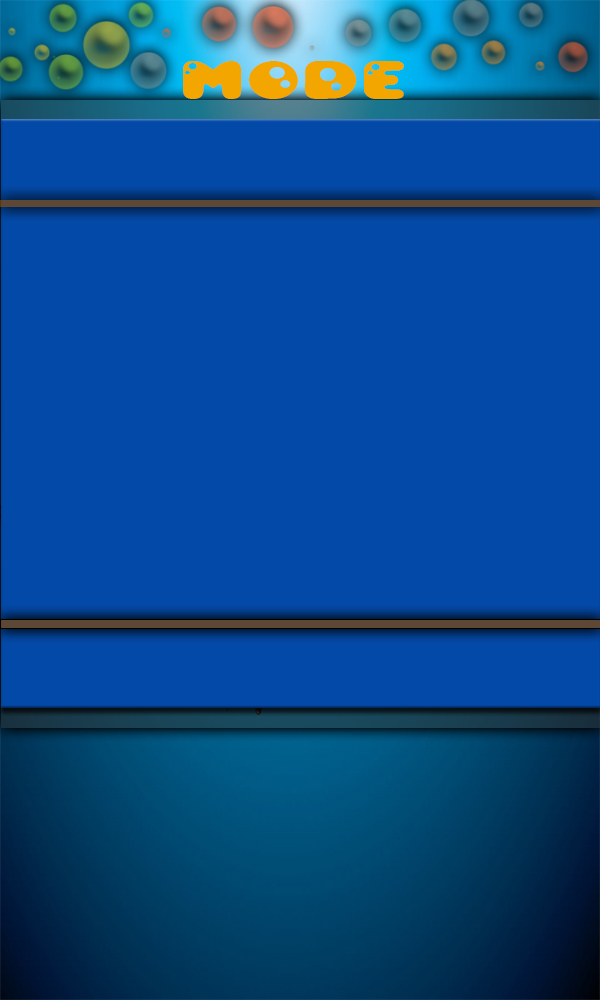
<style>
.page{position:relative;width:600px;height:1000px;background:#0349a7}
.page>*{position:absolute;margin:0}
.t1{font:48px "Bambina";color:#f3a600;scale:1.25 1}
</style>
<div class="page">
<p class="t1" style="left:183px;top:61px;width:221px;height:38px">MODE</p>
</div>
